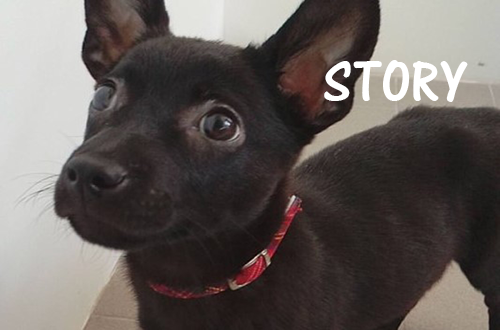
<style>
.page{position:relative;width:500px;height:330px}
.page>*{position:absolute;margin:0}
.t1{font:60px "ARCENA";color:#ffffff}
</style>
<div class="page">
<p class="t1" style="left:324px;top:60px;width:144px;height:42px">STORY</p>
</div>
